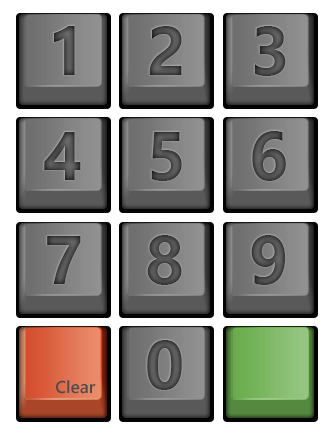
<style>
.page{position:relative;width:336px;height:436px;background:#ffffff}
.page>*{position:absolute;margin:0}
.t1{font:68.1px "SegoeUI-Bold";color:#4e4e4e}
.t2{font:68.1px "SegoeUI-Bold";color:#4b4b4b}
.t3{font:68.1px "SegoeUI-Bold";color:#4a4a4a}
.t4{font:68.1px "SegoeUI-Bold";color:#4c4c4c}
.t5{font:68.1px "SegoeUI-Bold";color:#4d4d4d}
.t6{font:68.1px "SegoeUI-Bold";color:#505050}
.t7{font:17.3px "SegoeUI-SemiBold";color:#4c4c4c}
</style>
<div class="page">
<p class="t1" style="left:54px;top:26px;width:21px;height:49px">1</p>
<p class="t2" style="left:149px;top:26px;width:33px;height:49px">2</p>
<p class="t3" style="left:254px;top:26px;width:32px;height:50px">3</p>
<p class="t4" style="left:44px;top:132px;width:37px;height:48px">4</p>
<p class="t2" style="left:151px;top:132px;width:31px;height:49px">5</p>
<p class="t4" style="left:252px;top:131px;width:34px;height:50px">6</p>
<p class="t5" style="left:47px;top:236px;width:34px;height:48px">7</p>
<p class="t3" style="left:147px;top:235px;width:35px;height:50px">8</p>
<p class="t5" style="left:251px;top:235px;width:35px;height:50px">9</p>
<p class="t6" style="left:147px;top:340px;width:35px;height:50px">0</p>
<p class="t7" style="left:56px;top:380px;width:40px;height:14px">Clear</p>
</div>
